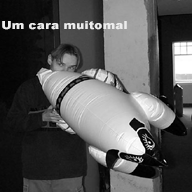
<style>
.page{position:relative;width:192px;height:192px}
.page>*{position:absolute;margin:0}
.t1{font:11px "Arial-Black";letter-spacing:0.005em;color:#ececec;scale:1.13 1}
</style>
<div class="page">
<p class="t1" style="left:2px;top:21px;width:125px;height:9px">Um cara muitomal</p>
</div>
